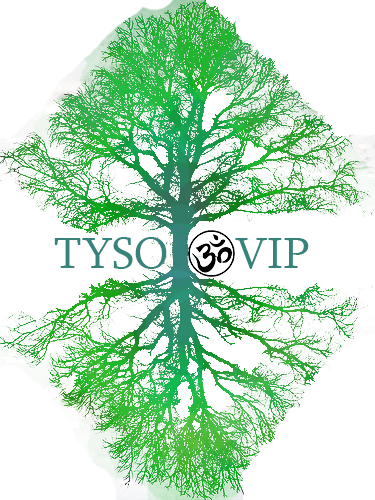
<style>
.page{position:relative;width:375px;height:500px;background:#ffffff}
.page>*{position:absolute;margin:0}
.t1{font:45px "Sylfaen";color:#37827b}
</style>
<div class="page">
<p class="t1" style="left:54px;top:237px;width:255px;height:32px">TYSO      VIP</p>
</div>
